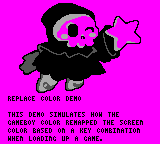
<style>
.page{position:relative;width:160px;height:144px;background:#ff00ff}
.page>*{position:absolute;margin:0}
.t1{font:16px/8px "Minimal5";color:#000000;text-transform:uppercase}
</style>
<div class="page">
<p class="t1" style="left:8px;top:96px;width:135px;height:45px">Replace Color Demo<br><br>This demo simulates how the GameBoy Color remapped the screen color based on a key combination when loading up a game.</p>
</div>
